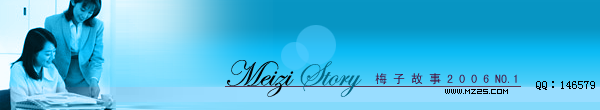
<style>
.page{position:relative;width:600px;height:110px}
.page>*{position:absolute;margin:0}
.t1{font:36px "EdwardianScriptITC";color:#000000}
.t2{font:36px "EdwardianScriptITC";color:#026784}
.t3{font:12px "SimHei";color:#49113e}
.t4{font:6px "04b08";color:#000000}
.t5{font:12px "SimSun";color:#000000}
</style>
<div class="page">
<p class="t1" style="left:227px;top:60px;width:135px;height:37px">Meizi <span class="t2">Story</span></p>
<p class="t3" style="left:375px;top:73px;width:142px;height:12px">梅 子 故 事 2 0 0 6 NO.1</p>
<p class="t4" style="left:445px;top:89px;width:63px;height:5px">www.mz25.com</p>
<p class="t5" style="left:536px;top:81px;width:59px;height:9px">QQ：146579</p>
</div>
